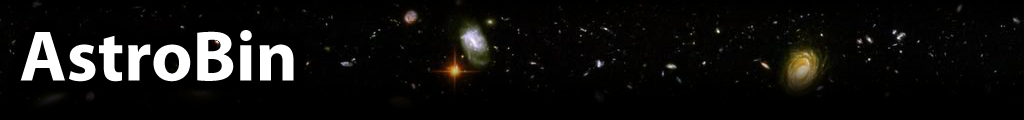
<style>
.page{position:relative;width:1024px;height:120px;background:#000000}
.page>*{position:absolute;margin:0}
.t1{font:72px "MyriadPro-Bold";color:#ffffff}
</style>
<div class="page">
<p class="t1" style="left:20px;top:30px;width:274px;height:52px">AstroBin</p>
</div>
